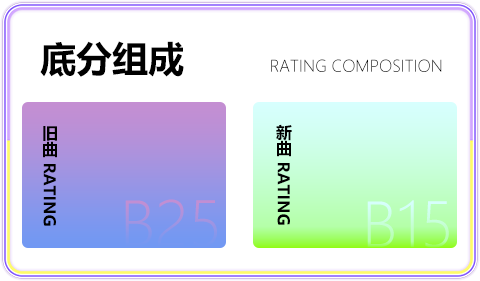
<style>
.page{position:relative;width:480px;height:281px;background:#ffffff}
.page>*{position:absolute;margin:0}
.t1{font:16px "MicrosoftYaHeiLight";color:#000000}
.t2{font:36px "MicrosoftYaHei-Bold";color:#000000}
.t3{font:60px "MicrosoftYaHeiLight"}
</style>
<div class="page">
<p class="t1" style="left:40px;top:41px;width:402px;height:36px"><span class="t2">底分组成        </span>RATING COMPOSITION</p>
<p class="t3" style="left:125px;top:199px;width:92px;height:48px">B25</p>
<p class="t3" style="left:367px;top:200px;width:82px;height:48px">B15</p>
</div>
